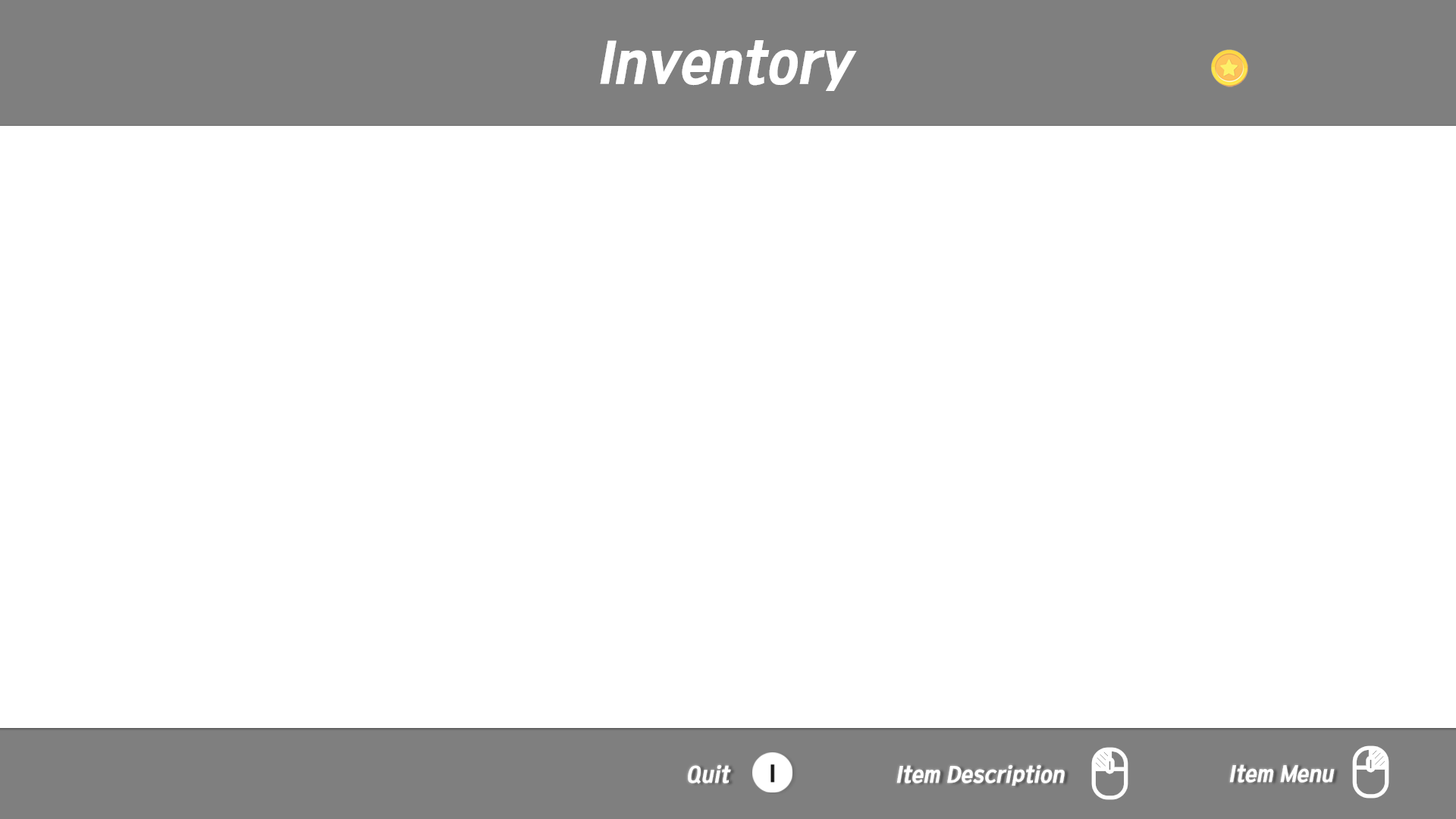
<style>
.page{position:relative;width:1456px;height:819px;background:#ffffff}
.page>*{position:absolute;margin:0}
.t1{font:54.6px "KoreanTITGD4-R";color:#ffffff;font-style:italic}
.t2{font:21.2px "KoreanTITGD4-R";color:#ffffff;font-style:italic}
</style>
<div class="page">
<p class="t1" style="left:600px;top:40px;width:257px;height:51px">Inventory</p>
<p class="t2" style="left:688px;top:764px;width:43px;height:20px">Quit</p>
<p class="t2" style="left:896px;top:764px;width:169px;height:22px">Item Description</p>
<p class="t2" style="left:1229px;top:764px;width:106px;height:19px">Item Menu</p>
</div>
